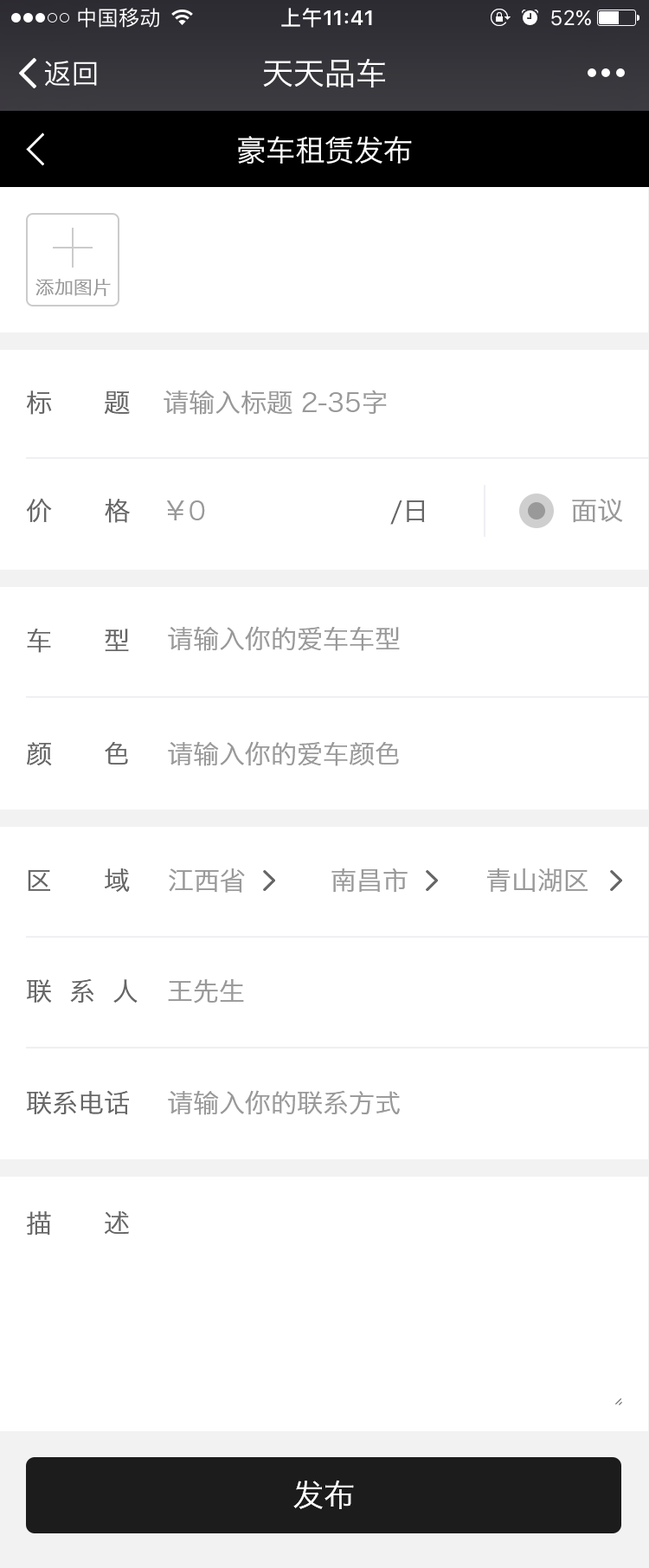
<style>
.page{position:relative;width:649px;height:1568px;background:#ffffff}
.page>*{position:absolute;margin:0}
.t1{font:31.2px "HiraginoSansGB-W3";color:#ffffff}
.t2{font:29.4px "HiraginoSansGB-W3";color:#ffffff}
.t3{font:19px "HiraginoSansGB-W3";color:#999999}
.t4{font:26px "HiraginoSansGB-W3";color:#999999;text-transform:uppercase}
.t5{font:26px "HiraginoSansGB-W3";color:#666666;text-transform:uppercase}
.t6{font:31.2px "HiraginoSansGB-W3";color:#ffffff;text-transform:uppercase}
</style>
<div class="page">
<p class="t1" style="left:263px;top:59px;width:122px;height:29px">天天品车</p>
<p class="t2" style="left:238px;top:136px;width:174px;height:29px">豪车租赁发布</p>
<p class="t3" style="left:35px;top:279px;width:76px;height:17px">添加图片</p>
<p class="t4" style="left:164px;top:390px;width:223px;height:25px">请输入标题 2-35字</p>
<p class="t5" style="left:26px;top:390px;width:104px;height:25px">标      题</p>
<p class="t5" style="left:26px;top:498px;width:104px;height:25px">价      格</p>
<p class="t4" style="left:166px;top:500px;width:39px;height:20px">￥0</p>
<p class="t5" style="left:390px;top:500px;width:35px;height:25px">/日</p>
<p class="t4" style="left:572px;top:499px;width:51px;height:24px">面议</p>
<p class="t5" style="left:27px;top:629px;width:102px;height:24px">车      型</p>
<p class="t4" style="left:168px;top:626px;width:232px;height:25px">请输入你的爱车车型</p>
<p class="t5" style="left:27px;top:741px;width:101px;height:25px">颜      色</p>
<p class="t4" style="left:168px;top:741px;width:231px;height:25px">请输入你的爱车颜色</p>
<p class="t5" style="left:28px;top:868px;width:102px;height:24px">区      域</p>
<p class="t4" style="left:169px;top:868px;width:76px;height:25px">江西省</p>
<p class="t4" style="left:332px;top:868px;width:76px;height:25px">南昌市</p>
<p class="t4" style="left:487px;top:868px;width:101px;height:25px">青山湖区</p>
<p class="t5" style="left:27px;top:978px;width:111px;height:25px">联  系  人</p>
<p class="t4" style="left:168px;top:978px;width:76px;height:25px">王先生</p>
<p class="t5" style="left:27px;top:1090px;width:102px;height:25px">联系电话</p>
<p class="t4" style="left:168px;top:1090px;width:232px;height:25px">请输入你的联系方式</p>
<p class="t5" style="left:27px;top:1211px;width:102px;height:25px">描      述</p>
<p class="t6" style="left:294px;top:1480px;width:60px;height:29px">发布</p>
</div>
